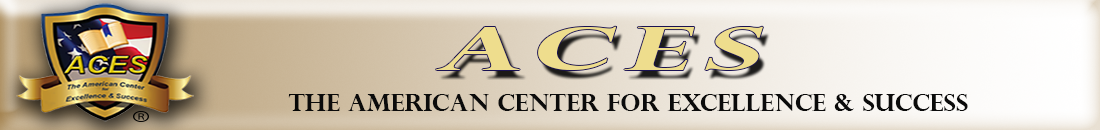
<style>
.page{position:relative;width:1100px;height:130px}
.page>*{position:absolute;margin:0}
.t1{font:24px "PerpetuaTitlingMT-Bold";color:#0b0b0b}
.t2{font:24px "PerpetuaTitlingMT-Bold";color:#070706}
</style>
<div class="page">
<p class="t1" style="left:288px;top:94px;width:680px;height:17px"><span class="t2">T</span>HE AMERICAN CENTER FOR EXCELLENCE &amp; SUCCESS</p>
</div>
